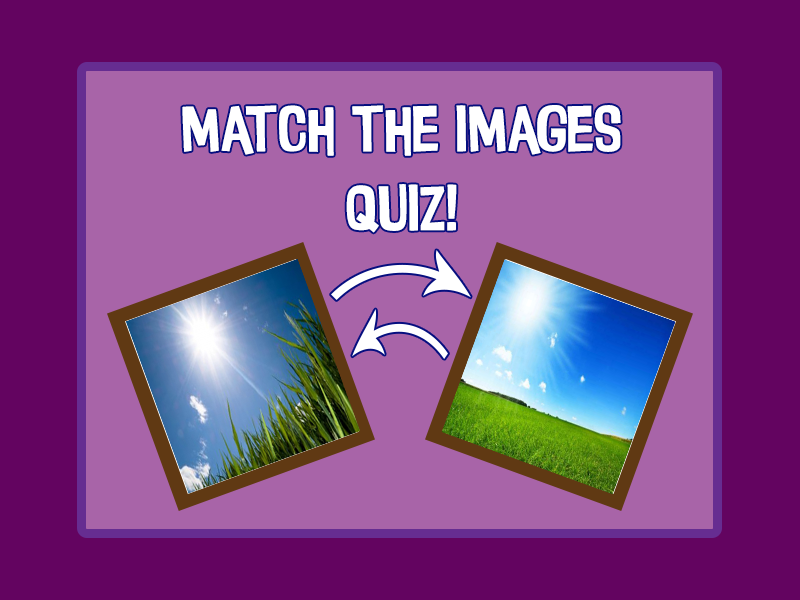
<style>
.page{position:relative;width:800px;height:600px;background:#630460}
.page>*{position:absolute;margin:0}
.t1{font:66px "InsideOut";color:#ffffff}
</style>
<div class="page">
<p class="t1" style="left:182px;top:105px;width:439px;height:128px;text-align:center">match the images<br>quiz!</p>
</div>
